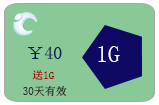
<style>
.page{position:relative;width:159px;height:105px;background:#89c997}
.page>*{position:absolute;margin:0}
.t1{font:18px "SimSun";color:#091e54}
.t2{font:24px "SimSun";color:#fef9f9}
.t3{font:11px "SimSun";color:#a80707}
.t4{font:11px "SimSun";color:#352a2a}
</style>
<div class="page">
<p class="t1" style="left:27px;top:46px;width:35px;height:13px">￥40</p>
<p class="t2" style="left:98px;top:46px;width:22px;height:16px">1G</p>
<p class="t3" style="left:32px;top:70px;width:23px;height:10px">送1G</p>
<p class="t4" style="left:23px;top:85px;width:44px;height:12px">30天有效</p>
</div>
